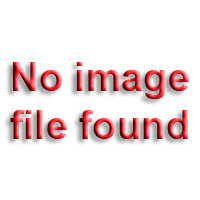
<style>
.page{position:relative;width:200px;height:200px;background:#ffffff}
.page>*{position:absolute;margin:0}
.t1{font:40px "Arial-BoldMT"}
</style>
<div class="page">
<p class="t1" style="left:10px;top:62px;width:179px;height:77px">No image<br>file found</p>
</div>
